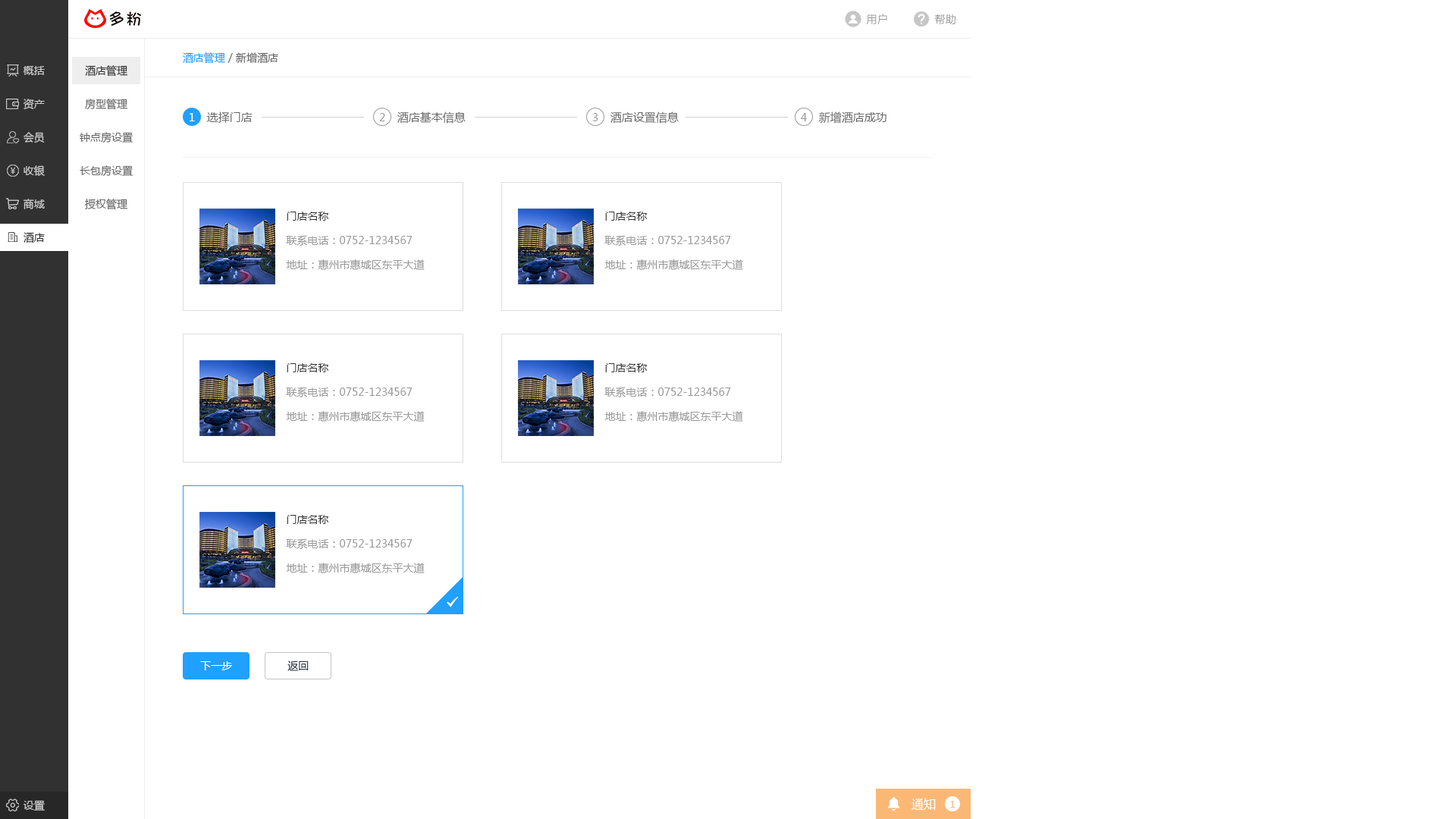
<style>
.page{position:relative;width:1456px;height:819px;background:#ffffff}
.page>*{position:absolute;margin:0}
.t1{font:10.6px "MicrosoftYaHei";letter-spacing:0.025em;color:#999999}
.t2{font:10.6px "MicrosoftYaHei";color:#666666}
.t3{font:10.6px "MicrosoftYaHei";color:#20a0ff}
.t4{font:10.6px "MicrosoftYaHei";color:#cccccc}
.t5{font:10.6px "MicrosoftYaHei";color:#333333}
.t6{font:10.6px "MicrosoftYaHei";color:#ffffff}
.t7{font:11.4px "MicrosoftYaHei";color:#666666}
.t8{font:10.6px "MicrosoftYaHei";color:#999999}
.t9{font:10.6px "MicrosoftYaHei";color:#313131}
.t10{font:10.6px "MicrosoftYaHei";color:#1f2d3d}
.t11{font:12.1px "MicrosoftYaHei";color:#ffffff}
.t12{font:9.1px "MicrosoftYaHei";color:#fbb875}
</style>
<div class="page">
<p class="t1" style="left:866px;top:14px;width:21px;height:11px">用户</p>
<p class="t1" style="left:935px;top:14px;width:20px;height:11px">帮助</p>
<p class="t2" style="left:183px;top:52px;width:95px;height:12px"><span class="t3">酒店管理</span> / 新增酒店</p>
<p class="t4" style="left:23px;top:66px;width:22px;height:9px">概括</p>
<p class="t5" style="left:85px;top:65px;width:42px;height:12px">酒店管理</p>
<p class="t4" style="left:24px;top:99px;width:21px;height:10px">资产</p>
<p class="t2" style="left:85px;top:99px;width:42px;height:11px">房型管理</p>
<p class="t6" style="left:190px;top:113px;width:5px;height:8px">1</p>
<p class="t7" style="left:207px;top:111px;width:46px;height:12px">选择门店</p>
<p class="t8" style="left:379px;top:113px;width:6px;height:8px">2</p>
<p class="t7" style="left:397px;top:111px;width:69px;height:13px">酒店基本信息</p>
<p class="t8" style="left:592px;top:113px;width:6px;height:8px">3</p>
<p class="t7" style="left:610px;top:111px;width:69px;height:13px">酒店设置信息</p>
<p class="t8" style="left:801px;top:113px;width:6px;height:8px">4</p>
<p class="t7" style="left:819px;top:111px;width:67px;height:13px">新增酒店成功</p>
<p class="t4" style="left:24px;top:132px;width:21px;height:11px">会员</p>
<p class="t2" style="left:80px;top:132px;width:53px;height:11px">钟点房设置</p>
<p class="t4" style="left:24px;top:165px;width:21px;height:11px">收银</p>
<p class="t2" style="left:80px;top:165px;width:53px;height:12px">长包房设置</p>
<p class="t4" style="left:23px;top:199px;width:22px;height:10px">商城</p>
<p class="t2" style="left:85px;top:199px;width:42px;height:11px">授权管理</p>
<p class="t5" style="left:287px;top:212px;width:42px;height:9px">门店名称</p>
<p class="t5" style="left:605px;top:212px;width:43px;height:9px">门店名称</p>
<p class="t9" style="left:24px;top:232px;width:21px;height:11px">酒店</p>
<p class="t8" style="left:286px;top:235px;width:127px;height:11px">联系电话：0752-1234567</p>
<p class="t8" style="left:604px;top:235px;width:127px;height:11px">联系电话：0752-1234567</p>
<p class="t8" style="left:286px;top:259px;width:139px;height:11px">地址：惠州市惠城区东平大道</p>
<p class="t8" style="left:604px;top:259px;width:139px;height:11px">地址：惠州市惠城区东平大道</p>
<p class="t5" style="left:287px;top:363px;width:42px;height:9px">门店名称</p>
<p class="t5" style="left:605px;top:363px;width:43px;height:9px">门店名称</p>
<p class="t8" style="left:286px;top:387px;width:127px;height:10px">联系电话：0752-1234567</p>
<p class="t8" style="left:604px;top:387px;width:127px;height:10px">联系电话：0752-1234567</p>
<p class="t8" style="left:286px;top:411px;width:139px;height:11px">地址：惠州市惠城区东平大道</p>
<p class="t8" style="left:604px;top:411px;width:139px;height:11px">地址：惠州市惠城区东平大道</p>
<p class="t5" style="left:287px;top:515px;width:42px;height:9px">门店名称</p>
<p class="t8" style="left:286px;top:538px;width:127px;height:11px">联系电话：0752-1234567</p>
<p class="t8" style="left:286px;top:563px;width:139px;height:10px">地址：惠州市惠城区东平大道</p>
<p class="t6" style="left:200px;top:661px;width:32px;height:9px">下一步</p>
<p class="t10" style="left:287px;top:660px;width:22px;height:11px">返回</p>
<p class="t11" style="left:912px;top:798px;width:24px;height:12px">通知</p>
<p class="t4" style="left:23px;top:800px;width:22px;height:11px">设置</p>
<p class="t12" style="left:950px;top:801px;width:5px;height:7px">1</p>
</div>
